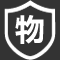
<style>
.page{position:relative;width:60px;height:60px;background:#333333}
.page>*{position:absolute;margin:0}
.t1{font:30px "MicrosoftYaHei-Bold";color:#ffffff}
</style>
<div class="page">
<p class="t1" style="left:15px;top:15px;width:29px;height:29px">物</p>
</div>
